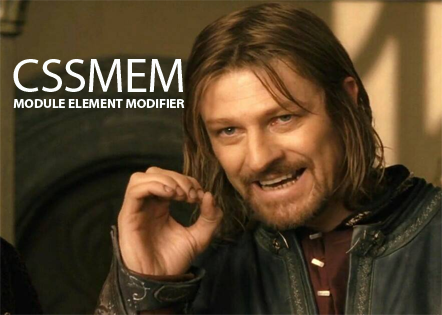
<style>
.page{position:relative;width:442px;height:315px}
.page>*{position:absolute;margin:0}
.t1{font:48.4px "MyriadPro-Regular";letter-spacing:-0.015em;color:#fbfdfc}
.t2{font:13.4px "MyriadPro-Bold";letter-spacing:-0.015em;color:#fbfdfc}
</style>
<div class="page">
<p class="t1" style="left:13px;top:59px;width:170px;height:33px">CSSMEM</p>
<p class="t2" style="left:13px;top:99px;width:172px;height:9px">MODULE ELEMENT MODIFIER</p>
</div>
